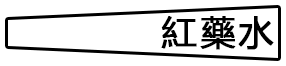
<style>
.page{position:relative;width:286px;height:66px;background:#ffffff}
.page>*{position:absolute;margin:0}
.t1{font:35px "MicrosoftYaHei";letter-spacing:0.06em;color:#000000;font-weight:bold}
</style>
<div class="page">
<p class="t1" style="left:161px;top:16px;width:113px;height:34px">紅藥水</p>
</div>
